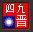
<style>
.page{position:relative;width:33px;height:32px;background:#f20000}
.page>*{position:absolute;margin:0}
.t1{font:10.4px "SimSun";color:#ffffff}
.t2{font:11.7px "SimSun";color:#ffffff}
</style>
<div class="page">
<p class="t1" style="left:6px;top:4px;width:19px;height:9px">四九</p>
<p class="t2" style="left:16px;top:15px;width:11px;height:12px">晋</p>
</div>
